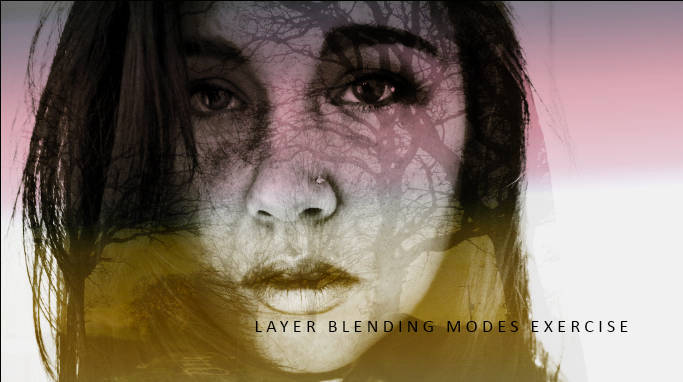
<style>
.page{position:relative;width:683px;height:382px}
.page>*{position:absolute;margin:0}
.t1{font:18px "Calibri";letter-spacing:0.2em;color:#000000;text-transform:uppercase}
</style>
<div class="page">
<p class="t1" style="left:255px;top:321px;width:373px;height:11px">Layer Blending Modes Exercise</p>
</div>
